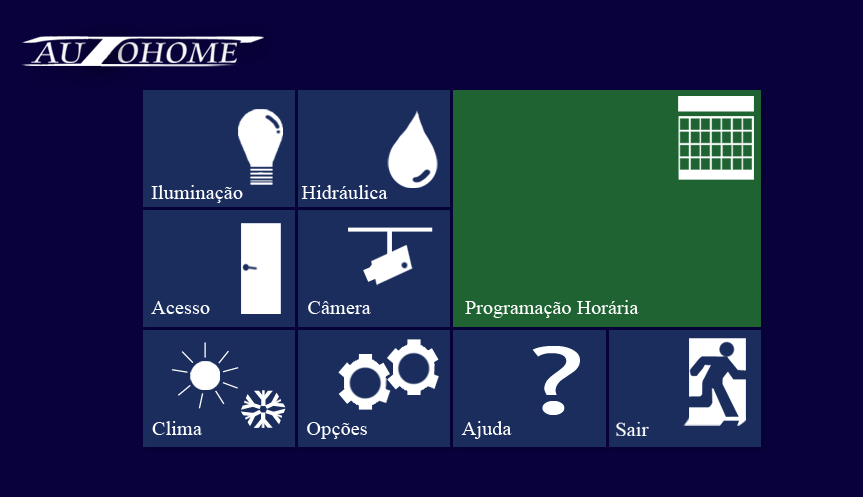
<style>
.page{position:relative;width:863px;height:497px;background:#08013b}
.page>*{position:absolute;margin:0}
.t1{font:31px "CataneoBT-Regular";color:#ffffff;scale:1.13 1}
.t2{font:20.4px "TimesNewRomanPSMT";color:#ffffff}
.t3{font:92.7px "TrebuchetMS";color:#fdfeff;scale:1.6 1}
.t4{font:20.9px "Arial-BoldMT";color:#ffffff;scale:1.3 1}
.t5{font:23.2px "Arial-BoldMT";color:#ffffff;scale:1.06 1}
.t6{font:23px "Arial-BoldMT";color:#ffffff;scale:1.09 1}
.t7{font:23.3px "Arial-BoldMT";color:#ffffff;scale:1.06 1}
</style>
<div class="page">
<p class="t1" style="left:118px;top:42px;width:119px;height:21px">OHOME</p>
<p class="t2" style="left:151px;top:185px;width:92px;height:18px">Iluminação</p>
<p class="t2" style="left:301px;top:185px;width:87px;height:14px">Hidráulica</p>
<p class="t2" style="left:151px;top:301px;width:59px;height:13px">Acesso</p>
<p class="t2" style="left:308px;top:301px;width:63px;height:13px">Câmera</p>
<p class="t2" style="left:465px;top:300px;width:174px;height:18px">Programação Horária</p>
<p class="t3" style="left:532px;top:346px;width:48px;height:69px">?</p>
<p class="t4" style="left:254px;top:390px;width:19px;height:16px">Y</p>
<p class="t5" style="left:241px;top:394px;width:20px;height:16px;rotate:-67deg">Y</p>
<p class="t6" style="left:265px;top:392px;width:21px;height:17px;rotate:59deg">Y</p>
<p class="t6" style="left:241px;top:409px;width:21px;height:17px;rotate:-122deg">Y</p>
<p class="t4" style="left:254px;top:412px;width:19px;height:16px;rotate:179deg">Y</p>
<p class="t7" style="left:265px;top:408px;width:21px;height:17px;rotate:112deg">Y</p>
<p class="t2" style="left:152px;top:421px;width:50px;height:14px">Clima</p>
<p class="t2" style="left:307px;top:422px;width:60px;height:17px">Opções</p>
<p class="t2" style="left:461px;top:421px;width:51px;height:18px">Ajuda</p>
</div>
